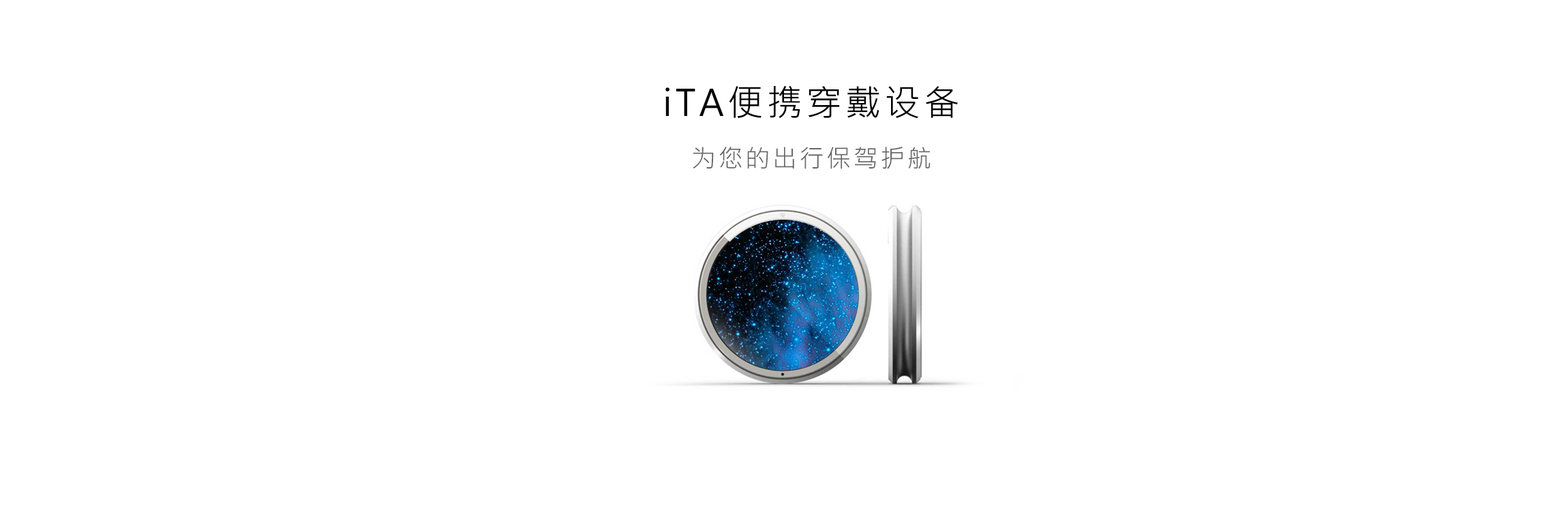
<style>
.page{position:relative;width:1568px;height:524px;background:#ffffff}
.page>*{position:absolute;margin:0}
.t1{font:36.1px "MicrosoftJhengHeiUIRegular";letter-spacing:0.088em;color:#010101}
.t2{font:24.8px "MicrosoftJhengHeiUIRegular";letter-spacing:0.088em;color:#676767}
</style>
<div class="page">
<p class="t1" style="left:665px;top:85px;width:293px;height:34px">iTA便携穿戴设备</p>
<p class="t2" style="left:693px;top:147px;width:238px;height:22px">为您的出行保驾护航</p>
</div>
